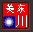
<style>
.page{position:relative;width:33px;height:32px;background:#f20000}
.page>*{position:absolute;margin:0}
.t1{font:10.4px "SimSun";color:#ffffff}
.t2{font:11.7px "SimSun";color:#ffffff}
</style>
<div class="page">
<p class="t1" style="left:6px;top:4px;width:19px;height:9px">美东</p>
<p class="t2" style="left:16px;top:15px;width:11px;height:12px">川</p>
</div>
